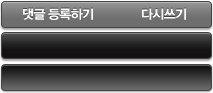
<style>
.page{position:relative;width:213px;height:93px}
.page>*{position:absolute;margin:0}
.t1{font:13px "YoonGothicB";letter-spacing:-0.05em;color:#ffffff}
</style>
<div class="page">
<p class="t1" style="left:23px;top:8px;width:70px;height:12px">댓글 등록하기</p>
<p class="t1" style="left:142px;top:8px;width:44px;height:12px">다시쓰기</p>
</div>
